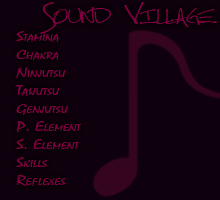
<style>
.page{position:relative;width:220px;height:200px;background:#0f000d}
.page>*{position:absolute;margin:0}
.t1{font:34.2px "TallPaul";color:#800040;font-variant:small-caps;scale:1.44 1}
.t2{font:14.2px "Mistral";color:#800040;font-variant:small-caps;scale:1.44 1}
</style>
<div class="page">
<p class="t1" style="left:40px;top:2px;width:177px;height:32px">Sound Village</p>
<p class="t2" style="left:15px;top:31px;width:66px;height:155px">Stamina<br>Chakra<br>Ninjutsu<br>Taijutsu<br>Genjutsu<br>P. Element<br>S. Element<br>Skills<br>Reflexes</p>
</div>
